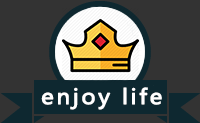
<style>
.page{position:relative;width:200px;height:123px;background:#333333}
.page>*{position:absolute;margin:0}
.t1{font:20px "MicrosoftYaHeiUI";letter-spacing:0.1em;color:#ffffff;font-weight:bold;scale:1.1 1}
</style>
<div class="page">
<p class="t1" style="left:41px;top:87px;width:121px;height:23px">enjoy life</p>
</div>
